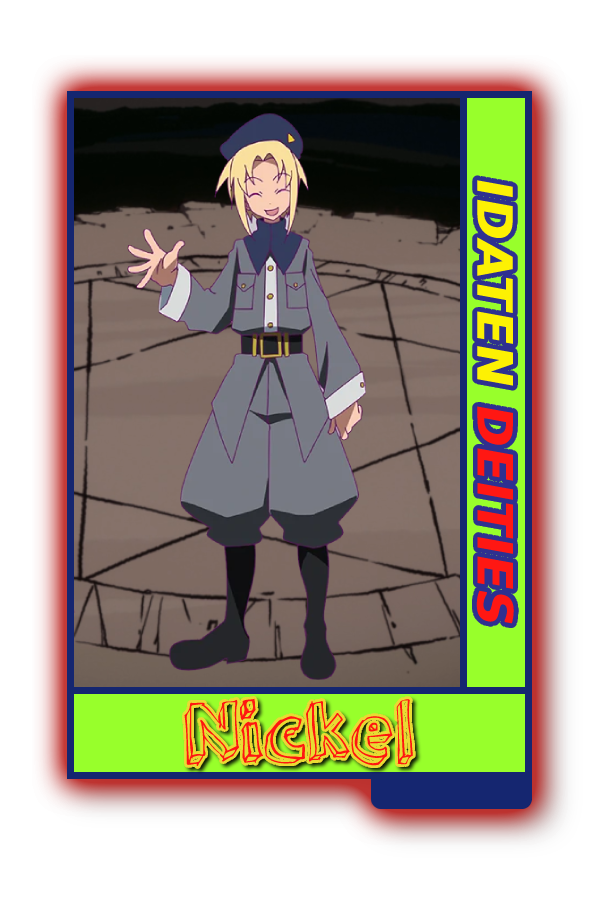
<style>
.page{position:relative;width:600px;height:900px;background:#ffffff}
.page>*{position:absolute;margin:0}
.t1{font:48.8px "MADETOMMY-Bold";color:#ff1713;font-weight:bold;font-style:italic}
.t2{font:48.8px "MADETOMMY-Bold";color:#fdf103;font-weight:bold;font-style:italic}
.t3{font:75px "3dumb";color:#ff1611}
</style>
<div class="page">
<p class="t1" style="left:476px;top:180px;width:38px;height:444px;rotate:90deg"><span class="t2">IDATEN </span>DEITIES</p>
<p class="t3" style="left:184px;top:698px;width:229px;height:69px">Nickel</p>
</div>
